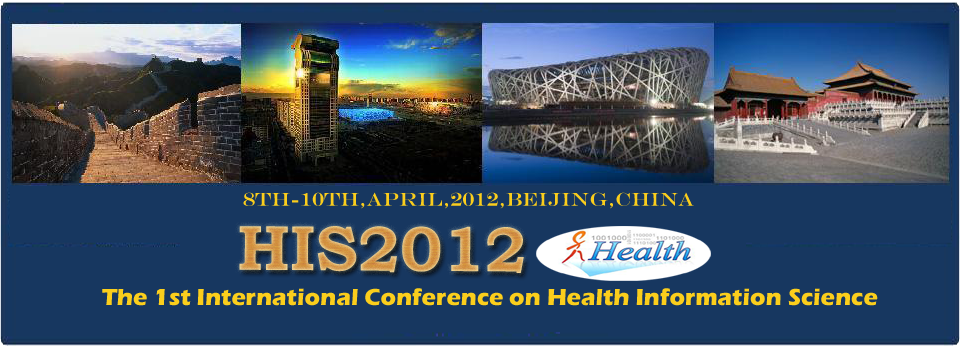
<style>
.page{position:relative;width:960px;height:347px;background:#173760}
.page>*{position:absolute;margin:0}
.t1{font:18.7px "EngraversMT";color:#fbce1c}
.t2{font:24px "ErasITC-Bold";color:#fbce1c}
</style>
<div class="page">
<p class="t1" style="left:243px;top:192px;width:451px;height:17px">8th-10th,April,2012,Beijing,China</p>
<p class="t2" style="left:102px;top:288px;width:776px;height:18px">The 1st International Conference on Health Information Science</p>
</div>
